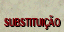
<style>
.page{position:relative;width:64px;height:32px;background:#c7c7ab}
.page>*{position:absolute;margin:0}
.t1{font:11px "Arial-BoldMT";letter-spacing:-0.04em;color:#85070e;scale:0.73 1}
</style>
<div class="page">
<p class="t1" style="left:4px;top:15px;width:56px;height:14px">SUBSTITUIÇÃO</p>
</div>
